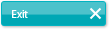
<style>
.page{position:relative;width:110px;height:30px;background:#4dc2cb}
.page>*{position:absolute;margin:0}
.t1{font:11px "MyriadPro-Regular";color:#ffffff}
</style>
<div class="page">
<p class="t1" style="left:12px;top:10px;width:16px;height:8px">Exit</p>
</div>
